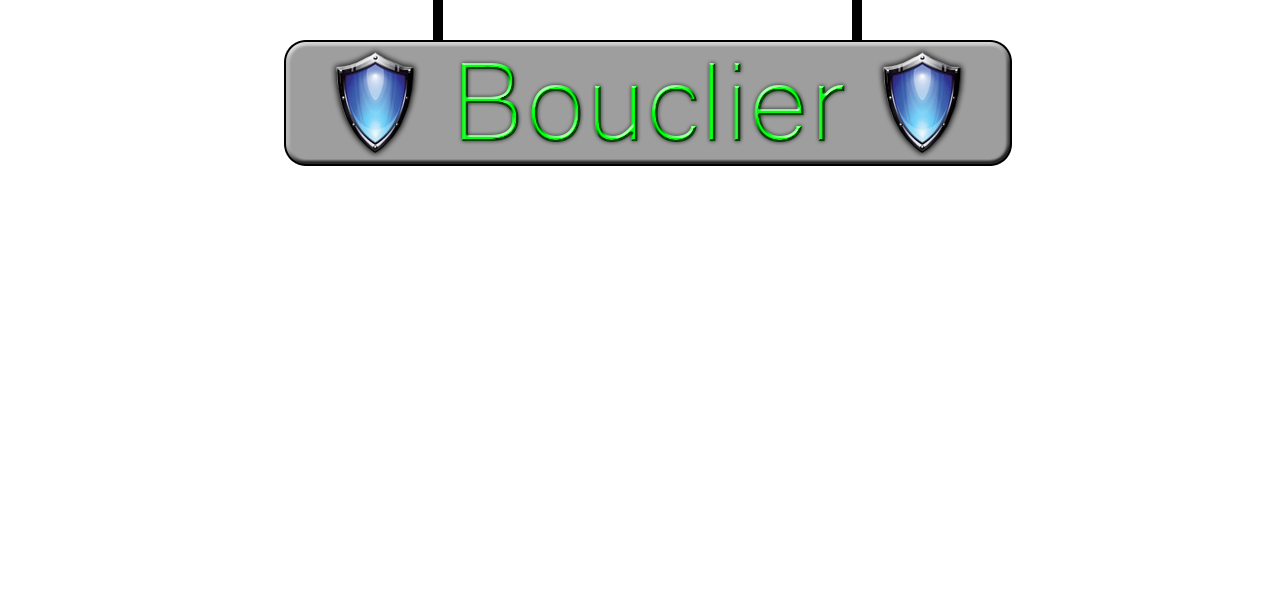
<style>
.page{position:relative;width:1280px;height:600px;background:#ffffff}
.page>*{position:absolute;margin:0}
.t1{font:145.1px "Microsoft-Yi-Baiti"}
</style>
<div class="page">
<p class="t1" style="left:462px;top:63px;width:383px;height:79px">Bouclier</p>
</div>
